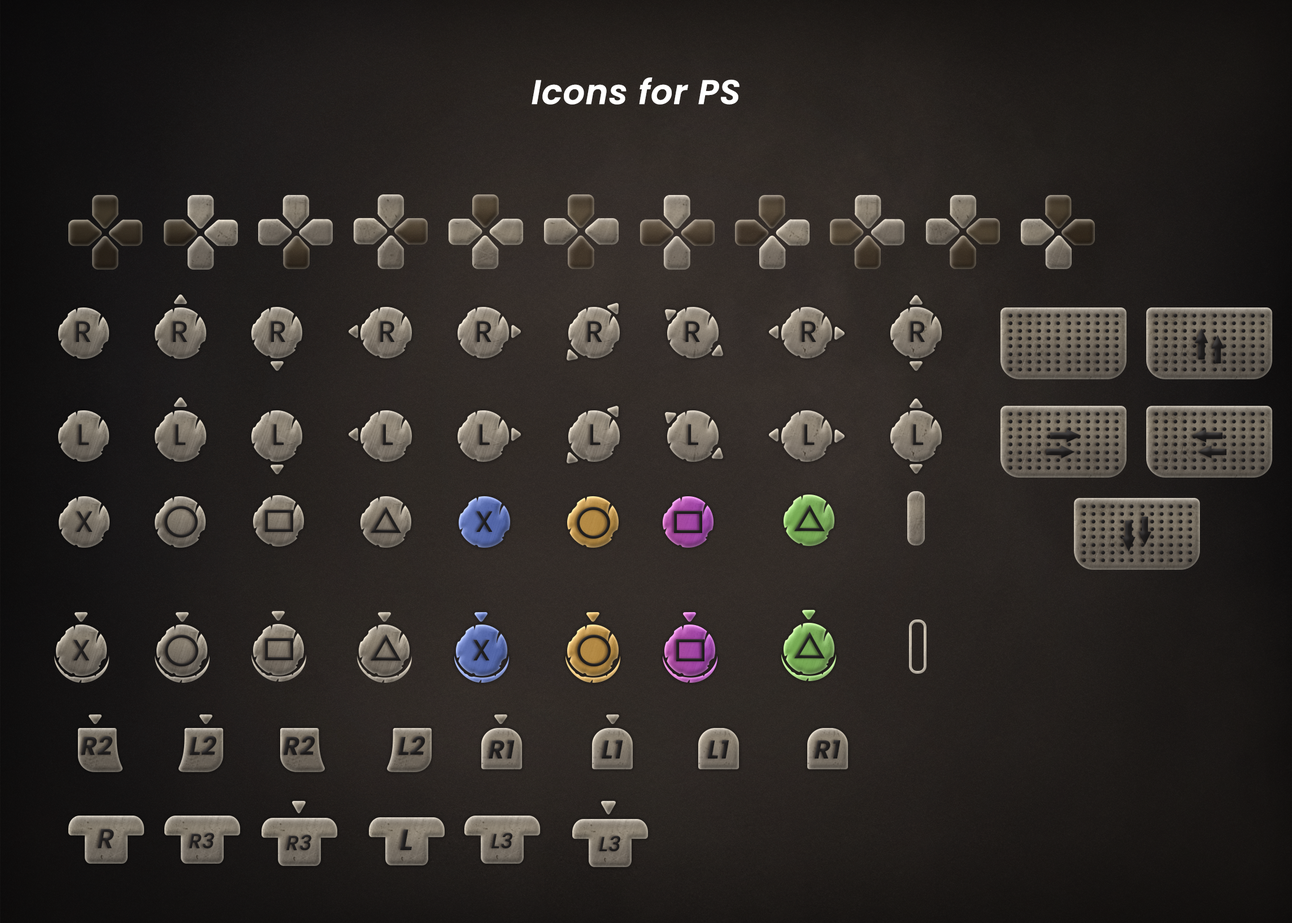
<style>
.page{position:relative;width:1292px;height:923px}
.page>*{position:absolute;margin:0}
.t1{font:33.9px "Poppins-SemiBoldItalic";color:#ffffff;font-weight:bold}
.t2{font:29.2px "Poppins-Regular";color:#201e1e;font-weight:bold}
.t3{font:25.4px "Poppins-Regular";font-weight:bold}
.t4{font:25.4px "Poppins-SemiBoldItalic";color:#201e1e;font-weight:bold}
.t5{font:27.1px "Poppins-MediumItalic";color:#201e1e;font-weight:bold}
.t6{font:20.3px "Poppins-MediumItalic";color:#201e1e;font-weight:bold}
.t7{font:29.1px "Poppins-SemiBoldItalic";color:#201e1e;font-weight:bold}
</style>
<div class="page">
<p class="t1" style="left:532px;top:77px;width:208px;height:28px">Icons for PS</p>
<p class="t2" style="left:76px;top:321px;width:14px;height:21px">R</p>
<p class="t2" style="left:173px;top:321px;width:14px;height:21px">R</p>
<p class="t2" style="left:271px;top:321px;width:14px;height:21px">R</p>
<p class="t2" style="left:380px;top:321px;width:15px;height:21px">R</p>
<p class="t2" style="left:477px;top:321px;width:15px;height:21px">R</p>
<p class="t2" style="left:588px;top:321px;width:14px;height:21px">R</p>
<p class="t2" style="left:685px;top:321px;width:15px;height:21px">R</p>
<p class="t2" style="left:802px;top:321px;width:15px;height:21px">R</p>
<p class="t2" style="left:910px;top:321px;width:15px;height:21px">R</p>
<p class="t2" style="left:79px;top:424px;width:10px;height:21px">L</p>
<p class="t3" style="left:80px;top:425px;width:9px;height:19px">L</p>
<p class="t2" style="left:175px;top:424px;width:11px;height:21px">L</p>
<p class="t2" style="left:273px;top:424px;width:11px;height:21px">L</p>
<p class="t2" style="left:383px;top:424px;width:10px;height:21px">L</p>
<p class="t2" style="left:479px;top:424px;width:11px;height:21px">L</p>
<p class="t2" style="left:590px;top:424px;width:11px;height:21px">L</p>
<p class="t2" style="left:688px;top:424px;width:10px;height:21px">L</p>
<p class="t2" style="left:804px;top:424px;width:11px;height:21px">L</p>
<p class="t2" style="left:913px;top:424px;width:11px;height:21px">L</p>
<p class="t2" style="left:76px;top:511px;width:17px;height:21px">X</p>
<p class="t2" style="left:476px;top:511px;width:17px;height:21px">X</p>
<p class="t2" style="left:73px;top:640px;width:17px;height:21px">X</p>
<p class="t2" style="left:474px;top:640px;width:16px;height:21px">X</p>
<p class="t4" style="left:81px;top:736px;width:31px;height:19px">R2</p>
<p class="t4" style="left:190px;top:736px;width:26px;height:19px">L2</p>
<p class="t4" style="left:284px;top:736px;width:31px;height:19px">R2</p>
<p class="t4" style="left:398px;top:736px;width:27px;height:19px">L2</p>
<p class="t4" style="left:489px;top:740px;width:26px;height:18px">R1</p>
<p class="t4" style="left:602px;top:740px;width:21px;height:18px">L1</p>
<p class="t4" style="left:707px;top:740px;width:22px;height:18px">L1</p>
<p class="t4" style="left:815px;top:740px;width:26px;height:18px">R1</p>
<p class="t5" style="left:98px;top:828px;width:16px;height:20px">R</p>
<p class="t6" style="left:189px;top:832px;width:25px;height:16px">R3</p>
<p class="t7" style="left:400px;top:829px;width:12px;height:21px">L</p>
<p class="t6" style="left:492px;top:832px;width:21px;height:16px">L3</p>
<p class="t6" style="left:286px;top:834px;width:25px;height:16px">R3</p>
<p class="t6" style="left:599px;top:835px;width:21px;height:17px">L3</p>
</div>
